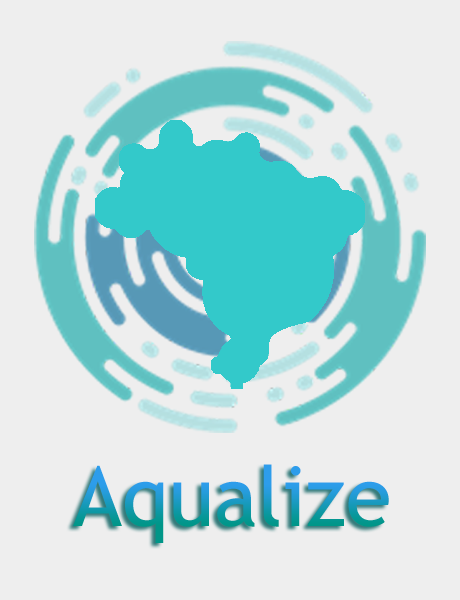
<style>
.page{position:relative;width:460px;height:600px;background:#eeeeee}
.page>*{position:absolute;margin:0}
.t1{font:83.3px "TrebuchetMS"}
</style>
<div class="page">
<p class="t1" style="left:73px;top:464px;width:316px;height:79px">Aqualize</p>
</div>
